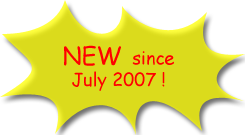
<style>
.page{position:relative;width:245px;height:135px;background:#ffffff}
.page>*{position:absolute;margin:0}
.t1{font:18px "ComicSansMS";color:#ff0000}
.t2{font:24px "ComicSansMS";color:#ff0000}
</style>
<div class="page">
<p class="t1" style="left:64px;top:45px;width:110px;height:46px;text-align:center"><span class="t2">NEW </span>since<br>July 2007 !</p>
</div>
